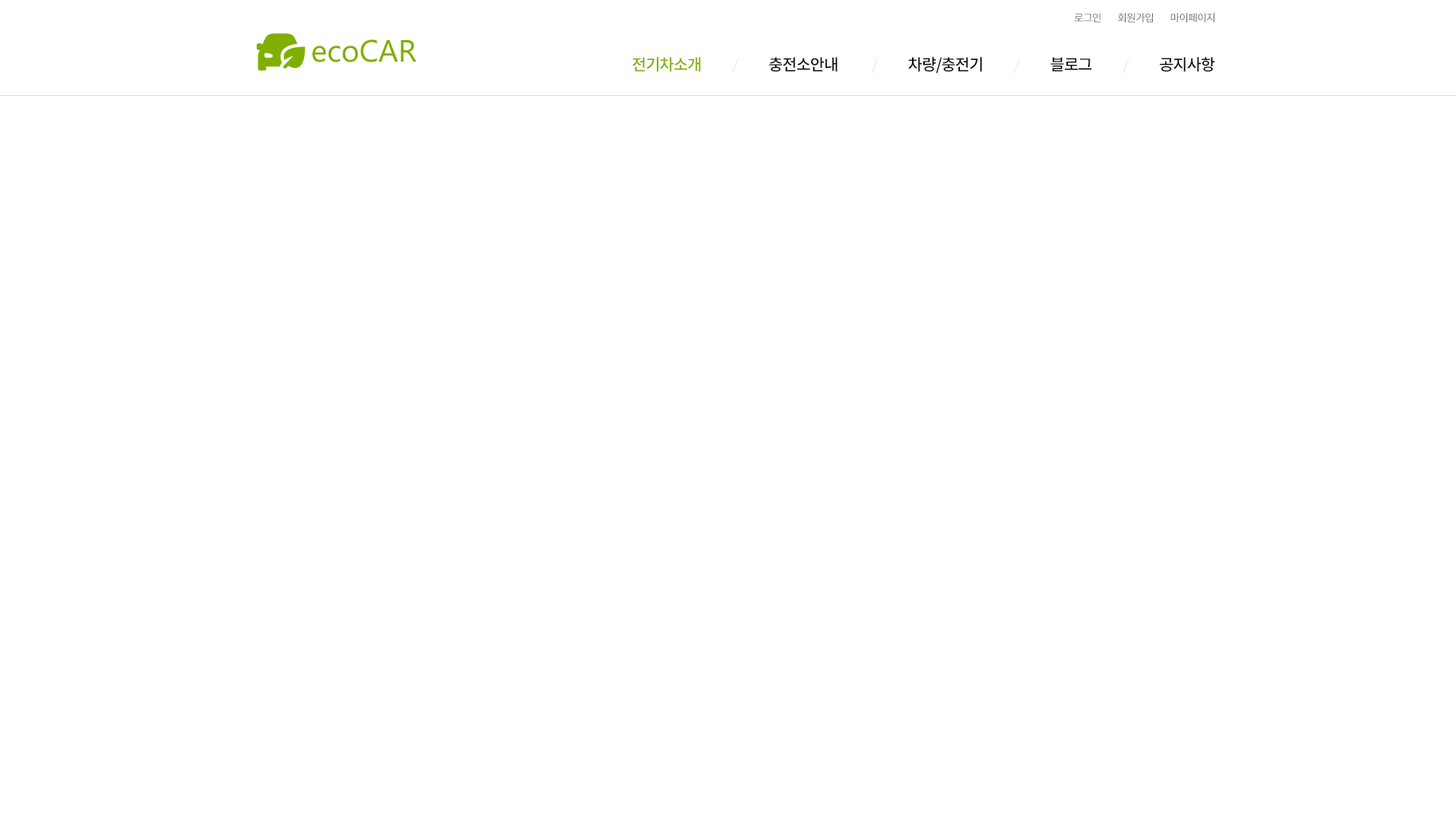
<style>
.page{position:relative;width:1456px;height:819px;background:#ffffff}
.page>*{position:absolute;margin:0}
.t1{font:10.4px "NotoSansCJKkr-Regular";letter-spacing:-0.05em;color:#686868;text-transform:uppercase}
.t2{font:16px "NotoSansCJKkr-Medium";letter-spacing:-0.05em;color:#111111;text-transform:uppercase}
.t3{font:16px "NotoSansCJKkr-Medium";letter-spacing:-0.05em;color:#686868;text-transform:uppercase}
.t4{font:16px "NotoSansCJKkr-Medium";letter-spacing:-0.05em;color:#80af00;text-transform:uppercase}
.t5{font:16px "NotoSansCJKkr-Thin";letter-spacing:-0.05em;color:#dadada;text-transform:uppercase}
</style>
<div class="page">
<p class="t1" style="left:1074px;top:13px;width:140px;height:9px">로그인         회원가입         마이페이지</p>
<p class="t2" style="left:632px;top:57px;width:583px;height:17px"><span class="t3"> </span><span class="t4">전기차소개           </span><span class="t5">/           </span>충전소안내            <span class="t5">/           </span>차량/충전기           <span class="t5">/           </span>블로그           <span class="t5">/           </span>공지사항</p>
</div>
